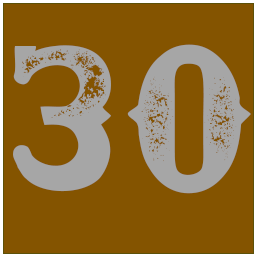
<style>
.page{position:relative;width:256px;height:256px;background:#845400}
.page>*{position:absolute;margin:0}
.t1{font:230px "Docktrin";color:#a6a6a6}
</style>
<div class="page">
<p class="t1" style="left:13px;top:44px;width:238px;height:150px">30</p>
</div>
